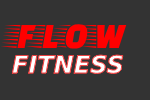
<style>
.page{position:relative;width:150px;height:100px;background:#333333}
.page>*{position:absolute;margin:0}
.t1{font:37px "FasterOne-Regular";color:#ff0000}
.t2{font:24px "DejaVuSans-BoldOblique"}
</style>
<div class="page">
<p class="t1" style="left:0px;top:24px;width:127px;height:25px">FLOW</p>
<p class="t2" style="left:11px;top:54px;width:113px;height:21px">FITNESS</p>
</div>
